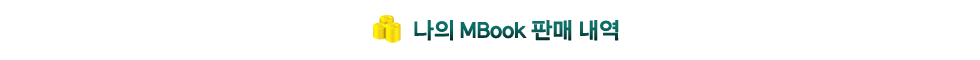
<style>
.page{position:relative;width:980px;height:60px;background:#ffffff}
.page>*{position:absolute;margin:0}
.t1{font:22px "HeummGothic152";letter-spacing:-0.1em;font-weight:bold}
</style>
<div class="page">
<p class="t1" style="left:414px;top:20px;width:205px;height:21px">나의 MBook 판매 내역</p>
</div>
